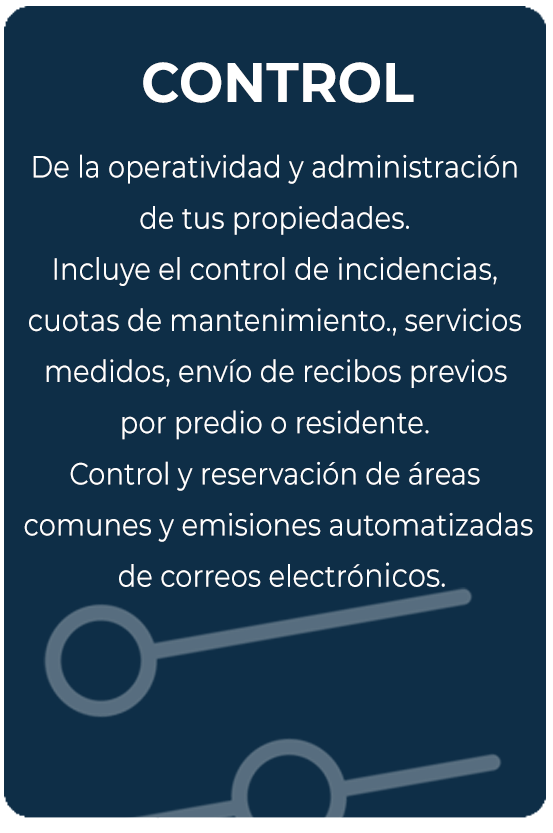
<style>
.page{position:relative;width:553px;height:833px;background:#0e2e47}
.page>*{position:absolute;margin:0}
.t1{font:55.6px "Montserrat-Bold";letter-spacing:0.004em;color:#ffffff;scale:0.94 1}
.t2{font:30.8px/51.1px "Montserrat-Regular";letter-spacing:0.004em;color:#ffffff;scale:0.88 1}
.t3{font:32.7px/51.1px "Montserrat-Regular";letter-spacing:0.004em;color:#ffffff;scale:0.88 1}
</style>
<div class="page">
<p class="t1" style="left:143px;top:62px;width:271px;height:41px">CONTROL</p>
<p class="t2" style="left:24px;top:154px;width:509px;height:433px;text-align:center">De la operatividad y administración <br>de tus propiedades. <br>Incluye el control de incidencias, <br>cuotas de mantenimiento., servicios <br>medidos, envío de recibos previos <br>por predio o residente. <br>Control y reservación de áreas <br>comunes y emisiones automatizadas<br> de correos electró<span class="t3">nicos.</span></p>
</div>
